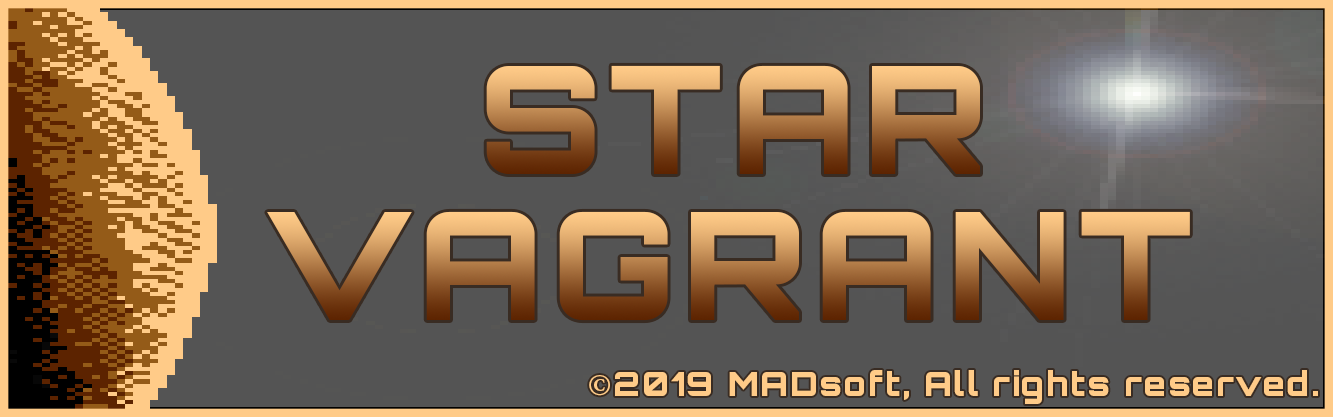
<style>
.page{position:relative;width:1333px;height:417px;background:#545454}
.page>*{position:absolute;margin:0}
.t1{font:150.1px "Orbitron-Black";letter-spacing:0.05em}
.t2{font:33.3px "Orbitron-Black";letter-spacing:0.05em;color:#ffcb88}
.t3{font:33.3px "MinionPro-Bold";letter-spacing:0.05em;color:#ffcb88}
</style>
<div class="page">
<p class="t1" style="left:486px;top:65px;width:494px;height:109px">STAR</p>
<p class="t1" style="left:267px;top:211px;width:923px;height:110px">VAGRANT</p>
<p class="t2" style="left:589px;top:370px;width:729px;height:34px"><span class="t3">©</span>2019 MADsoft, All rights reserved.</p>
</div>
